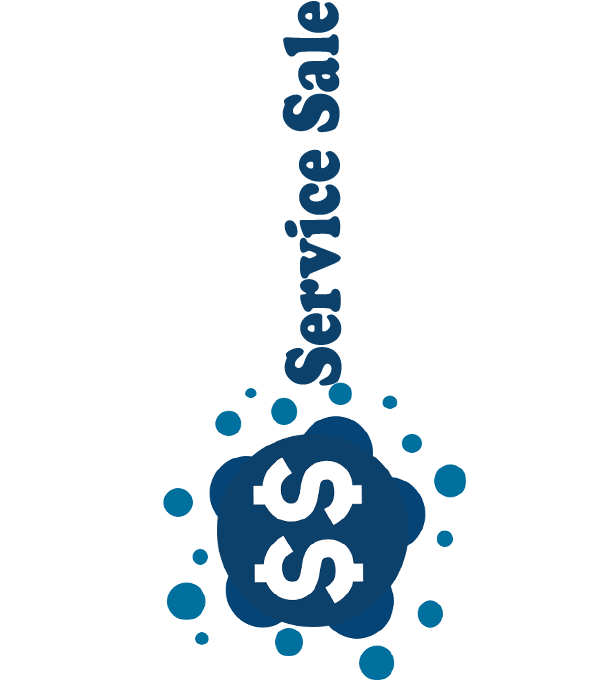
<style>
.page{position:relative;width:600px;height:700px;background:#ffffff}
.page>*{position:absolute;margin:0}
.t1{font:81.7px "CooperBlack";color:#0c416b;scale:0.77 1}
</style>
<div class="page">
<p class="t1" style="left:282px;top:1px;width:60px;height:385px;rotate:-90deg">Service Sale</p>
</div>
